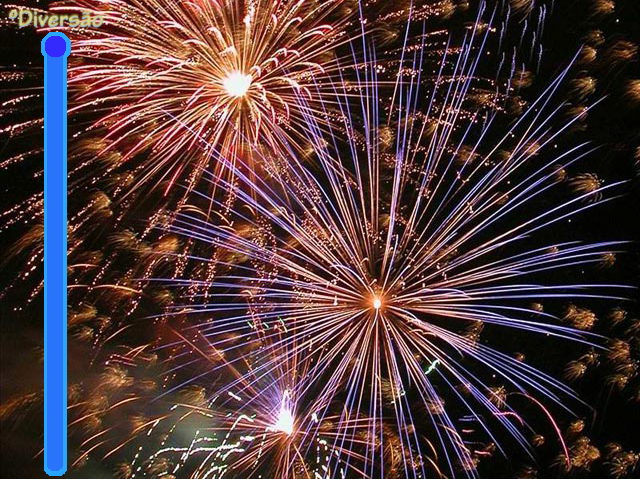
<style>
.page{position:relative;width:640px;height:480px}
.page>*{position:absolute;margin:0}
.t1{font:24px "TektonPro-Bold";color:#c3ca9a}
</style>
<div class="page">
<p class="t1" style="left:9px;top:11px;width:94px;height:17px">ºDiversão</p>
</div>
